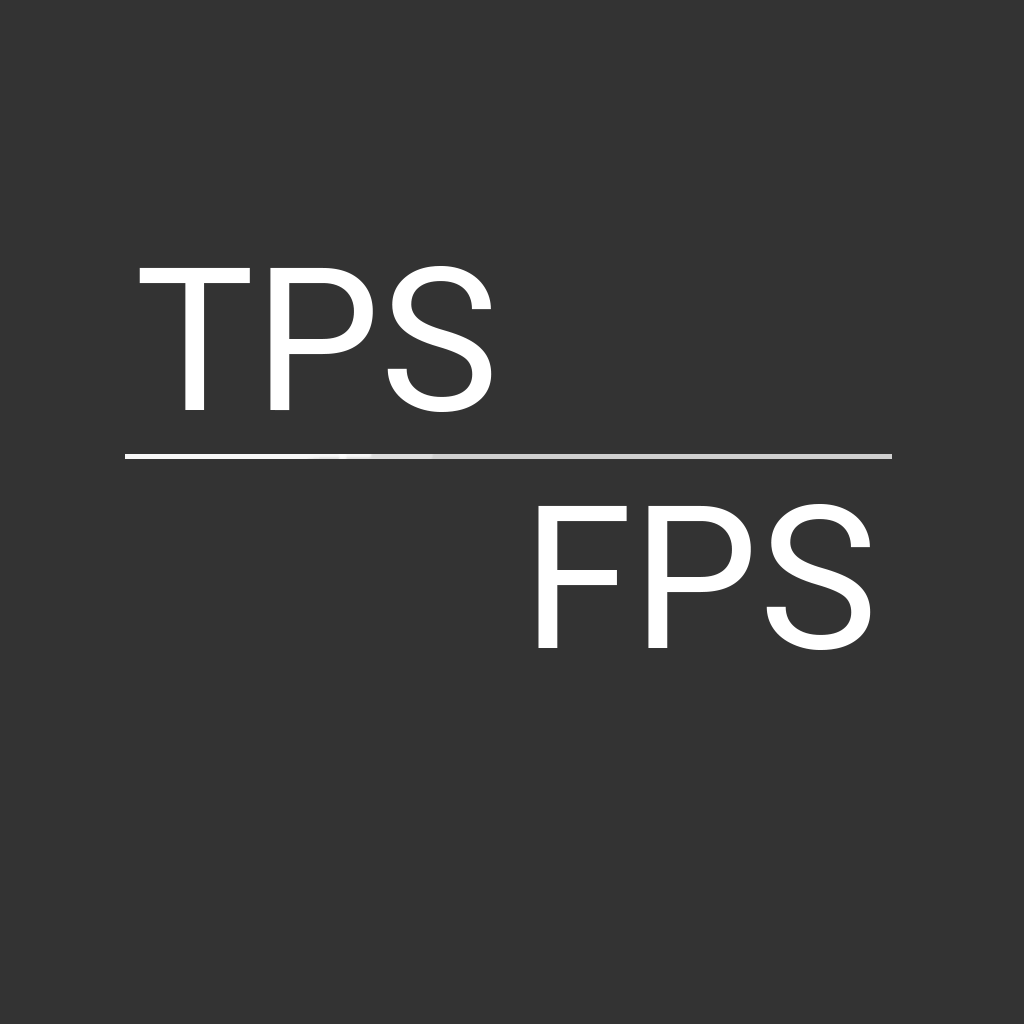
<style>
.page{position:relative;width:1024px;height:1024px;background:#333333}
.page>*{position:absolute;margin:0}
.t1{font:200px "Roboto-Regular";color:#ffffff}
</style>
<div class="page">
<p class="t1" style="left:139px;top:265px;width:353px;height:147px">TPS</p>
<p class="t1" style="left:538px;top:503px;width:333px;height:147px">FPS</p>
</div>
